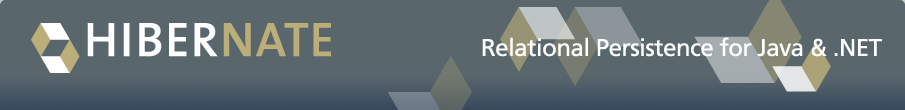
<style>
.page{position:relative;width:905px;height:110px;background:#59666c}
.page>*{position:absolute;margin:0}
.t1{font:24px "Frutiger-Roman";letter-spacing:-0.02em;color:#fdfeff}
</style>
<div class="page">
<p class="t1" style="left:482px;top:37px;width:400px;height:20px">Relational Persistence for Java &amp; .NET</p>
</div>
